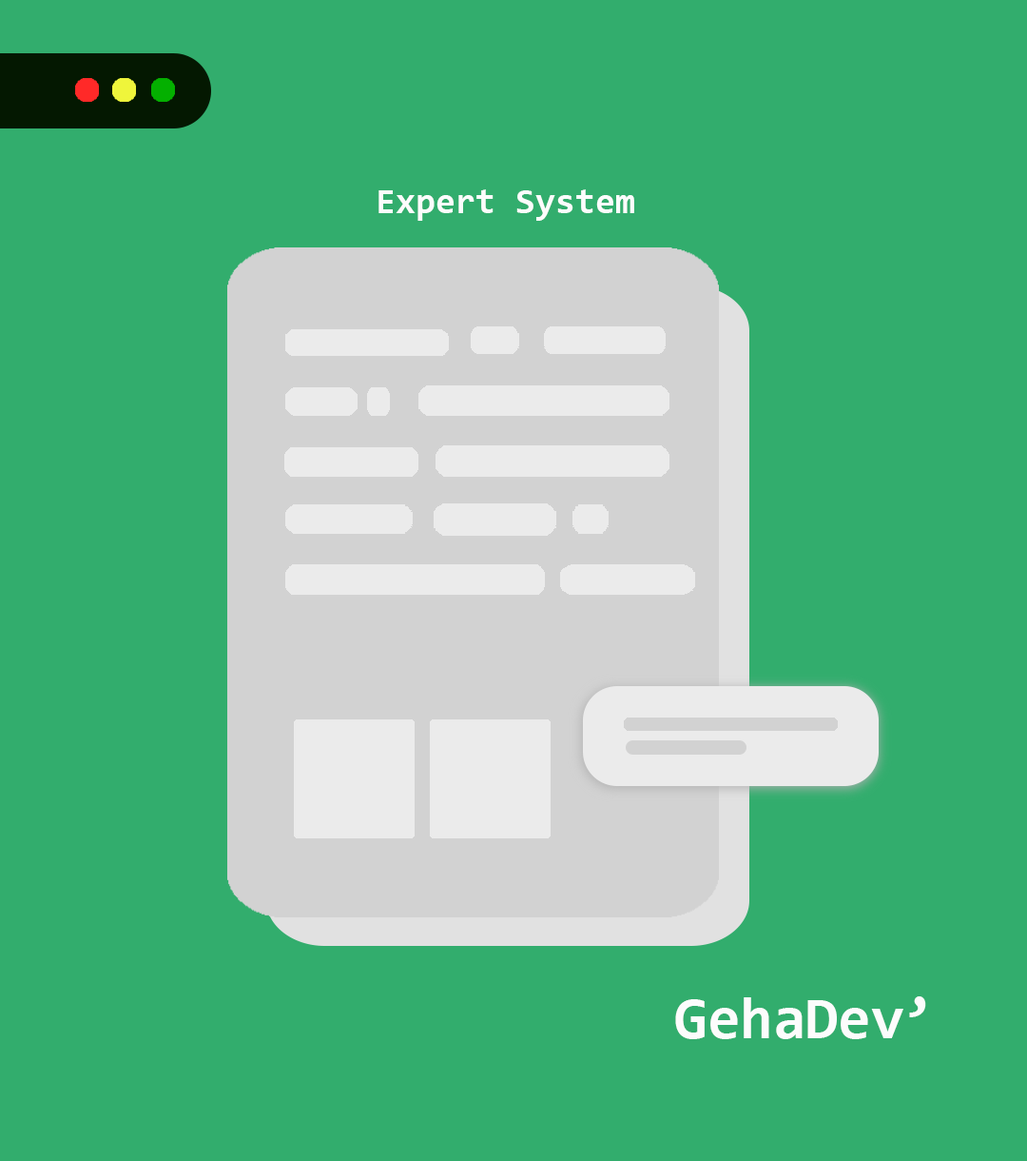
<style>
.page{position:relative;width:1027px;height:1161px;background:#32ad6d}
.page>*{position:absolute;margin:0}
.t1{font:36.3px "Consolas-Bold";color:#fcfcfc}
.t2{font:59.5px "Consolas-Bold";color:#fcfcfc}
</style>
<div class="page">
<p class="t1" style="left:379px;top:189px;width:256px;height:32px">Expert System</p>
<p class="t2" style="left:675px;top:996px;width:252px;height:43px">GehaDev’</p>
</div>
